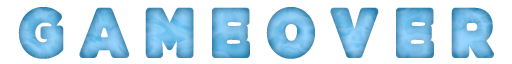
<style>
.page{position:relative;width:512px;height:64px;background:#ffffff}
.page>*{position:absolute;margin:0}
.t1{font:72px "BDCaramel-Variable"}
</style>
<div class="page">
<p class="t1" style="left:18px;top:7px;width:476px;height:52px">G A M E O V E R</p>
</div>
